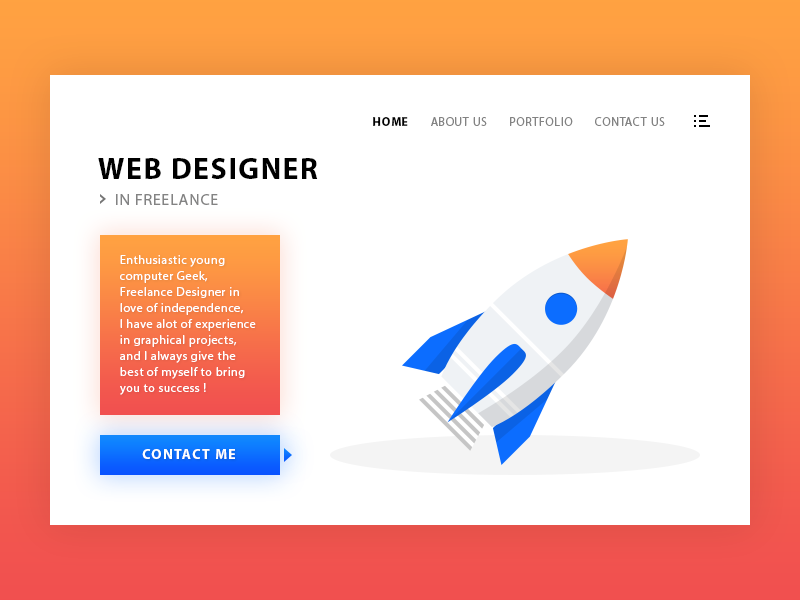
<style>
.page{position:relative;width:800px;height:600px;background:#ffffff}
.page>*{position:absolute;margin:0}
.t1{font:12px "MyriadPro-Regular";letter-spacing:0.05em;color:#838383;text-transform:uppercase}
.t2{font:12px "MyriadPro-Bold";letter-spacing:0.05em;color:#000000;text-transform:uppercase}
.t3{font:30px/26px "MyriadPro-Bold";letter-spacing:0.05em;color:#000000;text-transform:uppercase}
.t4{font:16px/26px "MyriadPro-Regular";letter-spacing:0.05em;color:#838383;text-transform:uppercase}
.t5{font:12px/16px "MyriadPro-Regular";letter-spacing:0.05em;color:#ffffff}
.t6{font:14px "MyriadPro-Bold";letter-spacing:0.1em;color:#ffffff;text-transform:uppercase}
</style>
<div class="page">
<p class="t1" style="left:373px;top:117px;width:292px;height:9px"><span class="t2">home  </span>     about us       portfolio       contact us</p>
<p class="t3" style="left:98px;top:158px;width:220px;height:47px">WEB DESIGNER<br><span class="t4">    IN FREELANCE</span></p>
<p class="t5" style="left:120px;top:255px;width:136px;height:140px">Enthusiastic young computer Geek, Freelance Designer in love of independence,<br>I have alot of experience in graphical projects, and I always give the best of myself to bring you to success !</p>
<p class="t6" style="left:142px;top:449px;width:93px;height:10px">contact me</p>
</div>
